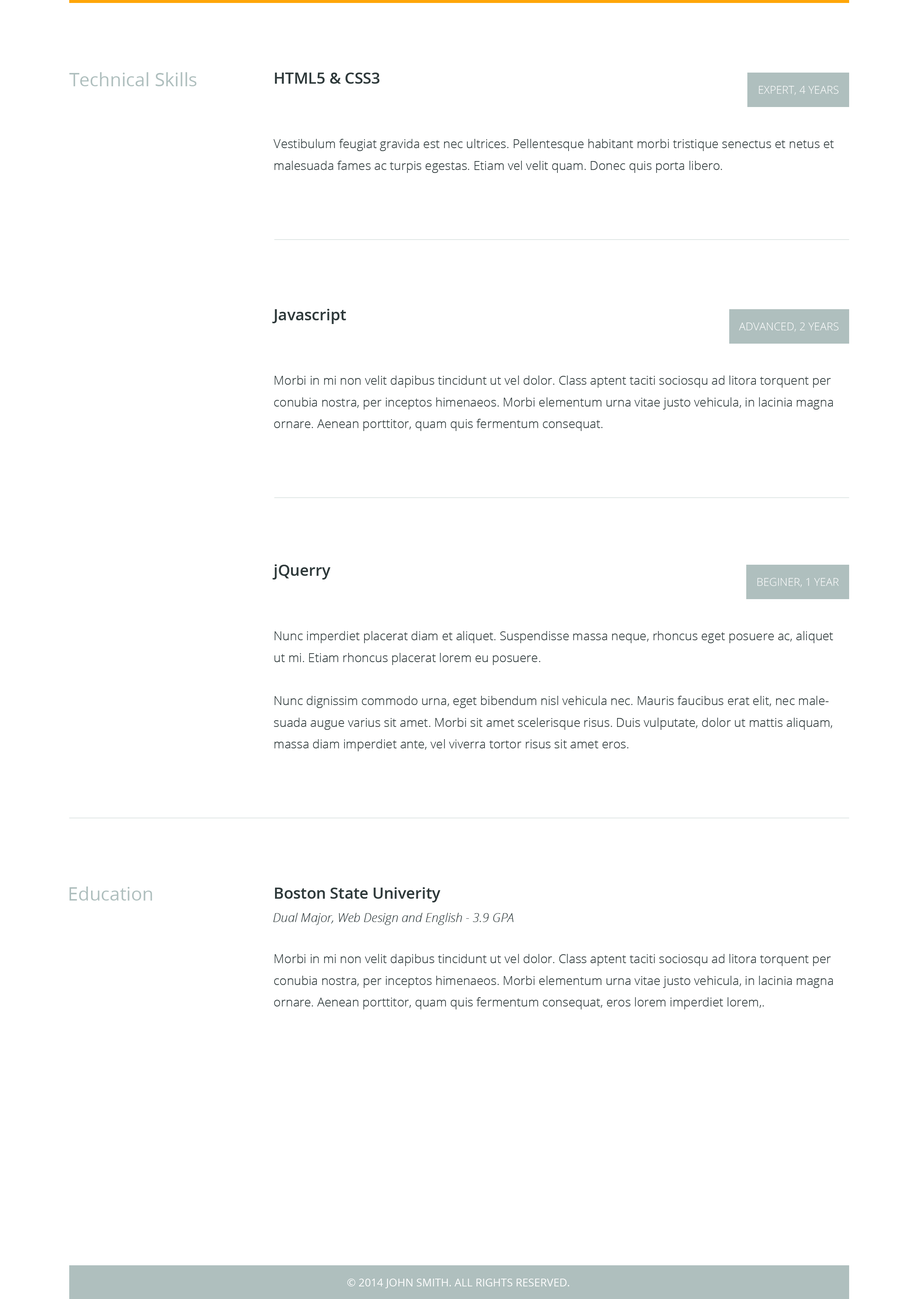
<style>
.page{position:relative;width:918px;height:1299px;background:#ffffff}
.page>*{position:absolute;margin:0}
.t1{font:18.5px "OpenSans";color:#afbfbe}
.t2{font:15.4px "OpenSans-Semibold";color:#303a3c;text-transform:uppercase}
.t3{font:10.8px "OpenSans-Light";color:#ffffff;text-transform:uppercase}
.t4{font:12.3px/21.6px "OpenSans-Light";color:#303a3c}
.t5{font:15.4px "OpenSans-Semibold";color:#303a3c}
.t6{font:12.3px "OpenSansLight-Italic";color:#303a3c}
.t7{font:10.8px "OpenSans";color:#ffffff;text-transform:uppercase}
</style>
<div class="page">
<p class="t1" style="left:69px;top:72px;width:128px;height:14px">Technical Skills</p>
<p class="t2" style="left:275px;top:73px;width:104px;height:11px">Html5 &amp; Css3</p>
<p class="t3" style="left:759px;top:86px;width:80px;height:9px">EXPERT, 4 YEARS</p>
<p class="t4" style="left:274px;top:139px;width:560px;height:34px">Vestibulum feugiat gravida est nec ultrices. Pellentesque habitant morbi tristique senectus et netus et malesuada fames ac turpis egestas. Etiam vel velit quam. Donec quis porta libero.</p>
<p class="t5" style="left:272px;top:309px;width:74px;height:15px">Javascript</p>
<p class="t3" style="left:739px;top:322px;width:100px;height:10px">ADVANCED, 2 YEARS</p>
<p class="t4" style="left:274px;top:375px;width:559px;height:56px">Morbi in mi non velit dapibus tincidunt ut vel dolor. Class aptent taciti sociosqu ad litora torquent per conubia nostra, per inceptos himenaeos. Morbi elementum urna vitae justo vehicula, in lacinia magna ornare. Aenean porttitor, quam quis fermentum consequat.</p>
<p class="t5" style="left:272px;top:564px;width:59px;height:15px">jQuerry</p>
<p class="t3" style="left:757px;top:578px;width:82px;height:9px">BEGINER, 1 YEAR</p>
<p class="t4" style="left:274px;top:631px;width:559px;height:120px">Nunc imperdiet placerat diam et aliquet. Suspendisse massa neque, rhoncus eget posuere ac, aliquet ut mi. Etiam rhoncus placerat lorem eu posuere.<br><br>Nunc dignissim commodo urna, eget bibendum nisl vehicula nec. Mauris faucibus erat elit, nec malesuada augue varius sit amet. Morbi sit amet scelerisque risus. Duis vulputate, dolor ut mattis aliquam, massa diam imperdiet ante, vel viverra tortor risus sit amet eros.</p>
<p class="t1" style="left:69px;top:886px;width:83px;height:14px">Education</p>
<p class="t5" style="left:275px;top:887px;width:166px;height:15px">Boston State Univerity</p>
<p class="t6" style="left:273px;top:913px;width:240px;height:12px">Dual Major, Web Design and English - 3.9 GPA</p>
<p class="t4" style="left:274px;top:954px;width:559px;height:55px">Morbi in mi non velit dapibus tincidunt ut vel dolor. Class aptent taciti sociosqu ad litora torquent per conubia nostra, per inceptos himenaeos. Morbi elementum urna vitae justo vehicula, in lacinia magna ornare. Aenean porttitor, quam quis fermentum consequat, eros lorem imperdiet lorem,.</p>
<p class="t7" style="left:347px;top:1278px;width:222px;height:10px">© 2014 John Smith. All rights reserved.</p>
</div>
